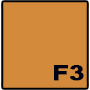
<style>
.page{position:relative;width:90px;height:90px;background:#d38b3b}
.page>*{position:absolute;margin:0}
.t1{font:21px "Arial-BoldMT";color:#000015;font-weight:bold;scale:1.27 1}
</style>
<div class="page">
<p class="t1" style="left:54px;top:65px;width:30px;height:16px">F3</p>
</div>
